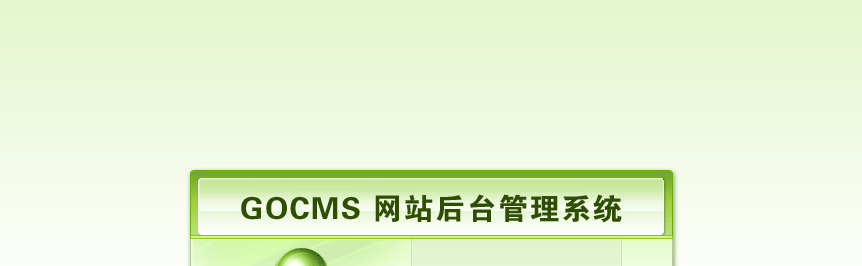
<style>
.page{position:relative;width:862px;height:266px}
.page>*{position:absolute;margin:0}
.t1{font:30px "FZDHTJW--GB1-0";letter-spacing:0.05em;color:#2e4e03}
</style>
<div class="page">
<p class="t1" style="left:241px;top:194px;width:381px;height:29px">GOCMS 网站后台管理系统</p>
</div>
